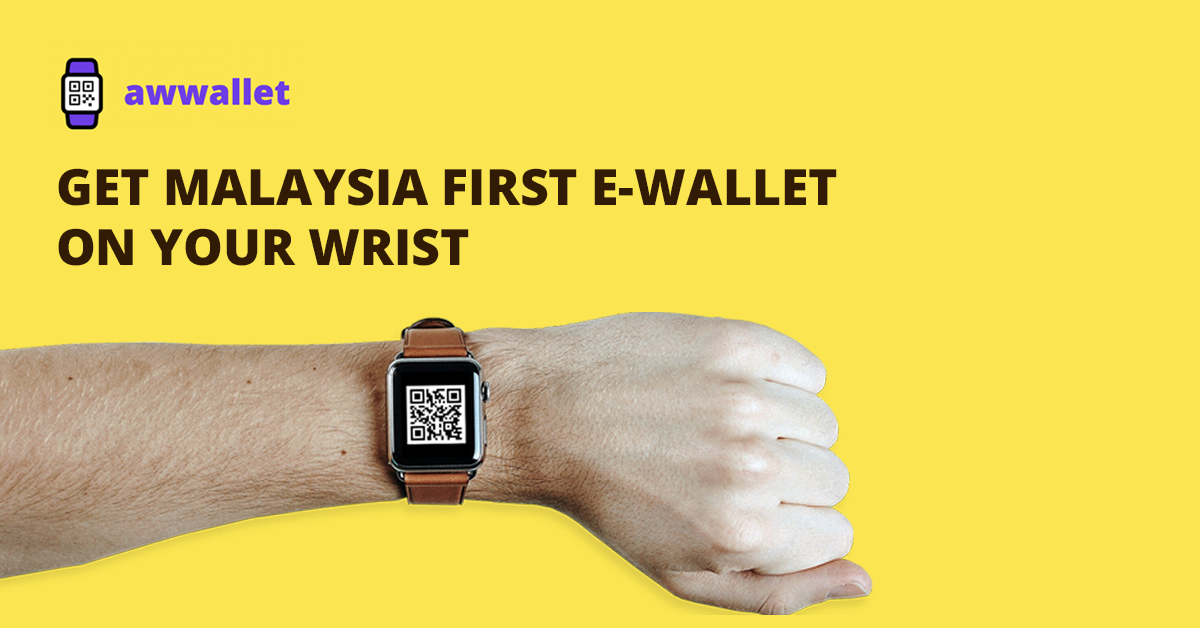
<style>
.page{position:relative;width:1200px;height:628px;background:#fbe551}
.page>*{position:absolute;margin:0}
.t1{font:50px "OpenSansRoman-ExtraBold";color:#321b05}
</style>
<div class="page">
<p class="t1" style="left:58px;top:168px;width:779px;height:98px">GET MALAYSIA FIRST E-WALLET<br>ON YOUR WRIST</p>
</div>
